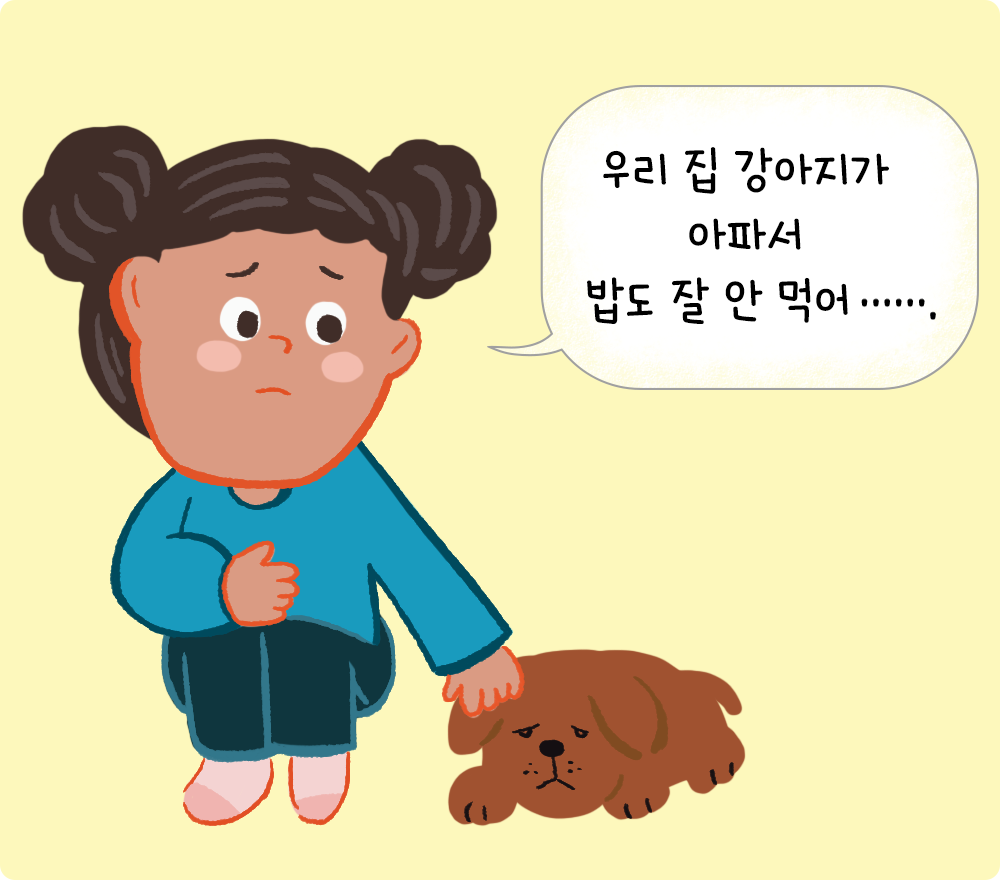
<style>
.page{position:relative;width:1000px;height:880px;background:#fdf8bc}
.page>*{position:absolute;margin:0}
.t1{font:54.3px "HakgyoansimNadeuriOTF-L";color:#000000}
</style>
<div class="page">
<p class="t1" style="left:587px;top:147px;width:302px;height:177px;text-align:center">우리 집 강아지가<br>아파서<br>밥도 잘 안 먹어</p>
</div>
